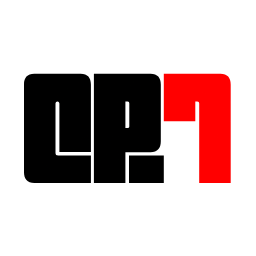
<style>
.page{position:relative;width:256px;height:256px;background:#ffffff}
.page>*{position:absolute;margin:0}
.t1{font:150px "Pincoyablack-Black";color:#000000}
.t2{font:150px "Pincoyablack-Black";color:#ff0000}
</style>
<div class="page">
<p class="t1" style="left:24px;top:73px;width:207px;height:110px">cp<span class="t2">7</span></p>
</div>
